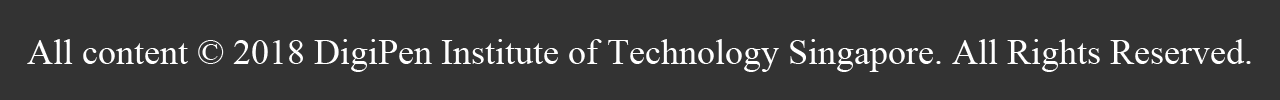
<style>
.page{position:relative;width:1280px;height:100px;background:#333333}
.page>*{position:absolute;margin:0}
.t1{font:36px "IskoolaPota";color:#ffffff}
</style>
<div class="page">
<p class="t1" style="left:27px;top:39px;width:1224px;height:33px">All content © 2018 DigiPen Institute of Technology Singapore. All Rights Reserved.</p>
</div>
